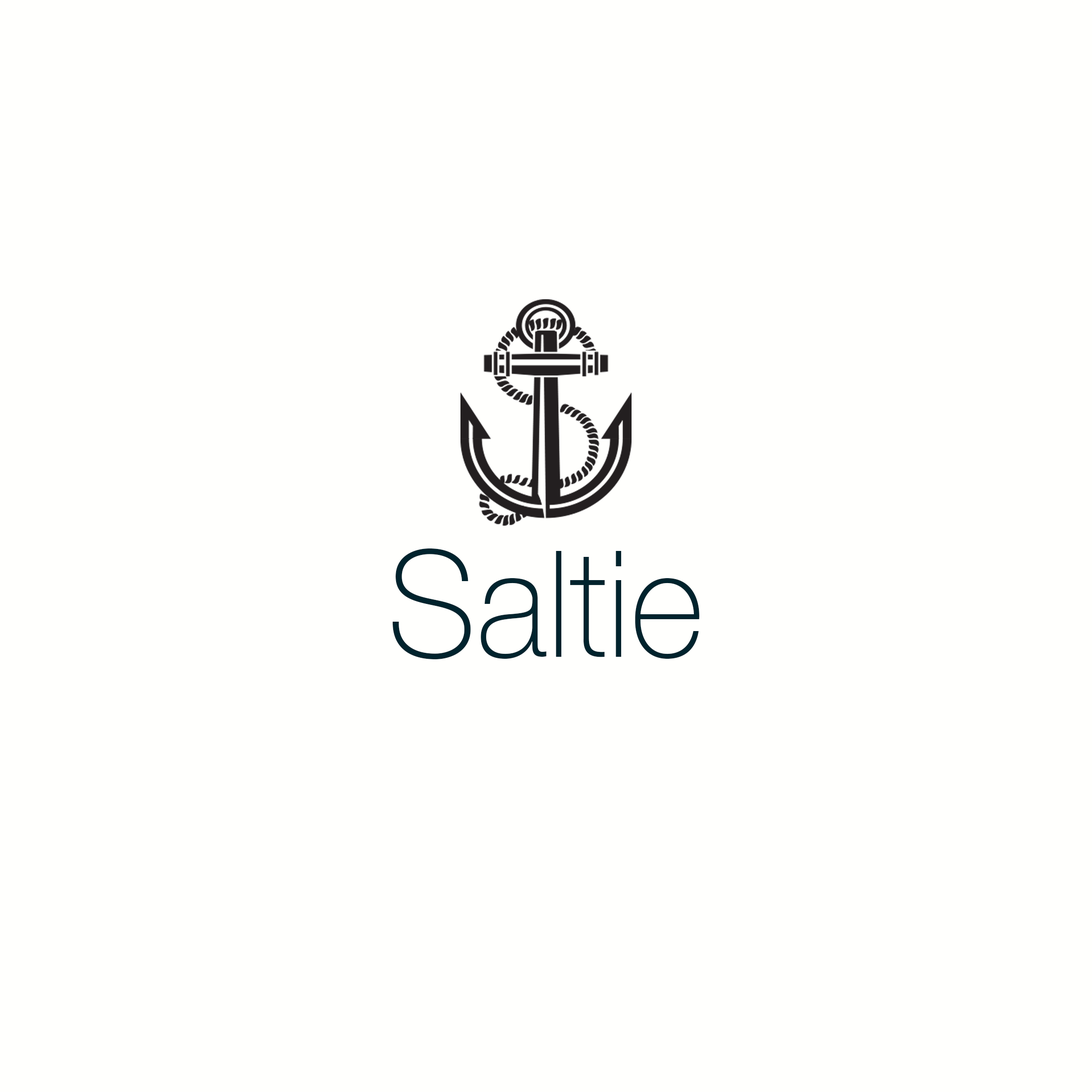
<style>
.page{position:relative;width:1092px;height:1092px;background:#fffffd}
.page>*{position:absolute;margin:0}
.t1{font:148.4px "HelveticaNeueLTPro-Th";color:#00232d;scale:0.95 1}
</style>
<div class="page">
<p class="t1" style="left:393px;top:548px;width:306px;height:112px">Saltie</p>
</div>
